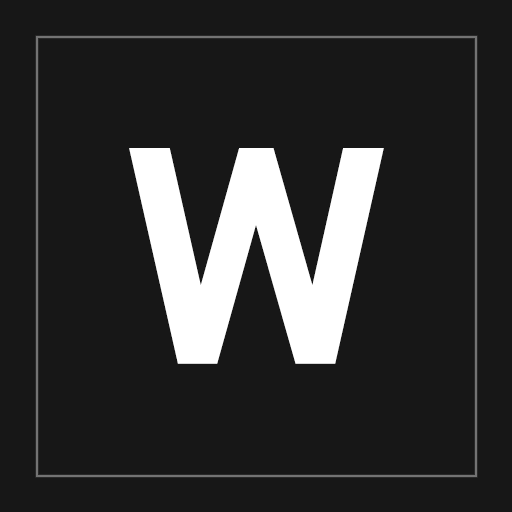
<style>
.page{position:relative;width:512px;height:512px;background:#171717}
.page>*{position:absolute;margin:0}
.t1{font:300px "CenturyGothic-Bold";color:#ffffff}
</style>
<div class="page">
<p class="t1" style="left:129px;top:148px;width:255px;height:216px">W</p>
</div>
